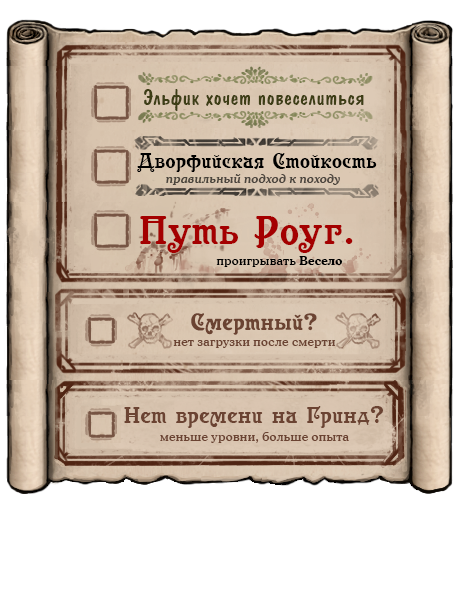
<style>
.page{position:relative;width:460px;height:600px;background:#ffffff}
.page>*{position:absolute;margin:0}
.t1{font:22px "ADomIno";letter-spacing:0.025em;color:#3e3e16}
.t2{font:20.7px "Casanova";letter-spacing:0.025em;color:#000000}
.t3{font:12px "CooperMediumCBT-Italic";letter-spacing:0.025em;color:#4c453e}
.t4{font:39.6px "Casanova";letter-spacing:0.025em;color:#a40000}
.t5{font:12px "CooperMediumCBT";letter-spacing:0.025em;color:#000000}
.t6{font:12px "CooperLightCBT-Bold";letter-spacing:0.025em;color:#000000}
.t7{font:23px "Casanova";letter-spacing:0.025em;color:#6b4332}
.t8{font:12px "CooperMediumCBT";letter-spacing:0.025em;color:#6b4332}
</style>
<div class="page">
<p class="t1" style="left:144px;top:89px;width:220px;height:22px">Эльфик хочет повеселиться</p>
<p class="t2" style="left:137px;top:153px;width:240px;height:19px">Дворфийская Стойкость</p>
<p class="t3" style="left:166px;top:174px;width:174px;height:11px">правильный подход к походу</p>
<p class="t4" style="left:140px;top:216px;width:213px;height:37px">Путь Роуг.</p>
<p class="t5" style="left:216px;top:256px;width:127px;height:11px">проигрывать <span class="t6">Весело</span></p>
<p class="t7" style="left:191px;top:313px;width:126px;height:22px">Смертный?</p>
<p class="t8" style="left:173px;top:340px;width:163px;height:8px">нет загрузки после смерти</p>
<p class="t7" style="left:124px;top:406px;width:259px;height:22px">Нет времени на Гринд?</p>
<p class="t8" style="left:160px;top:432px;width:189px;height:11px">меньше уровни, больше опыта</p>
</div>
